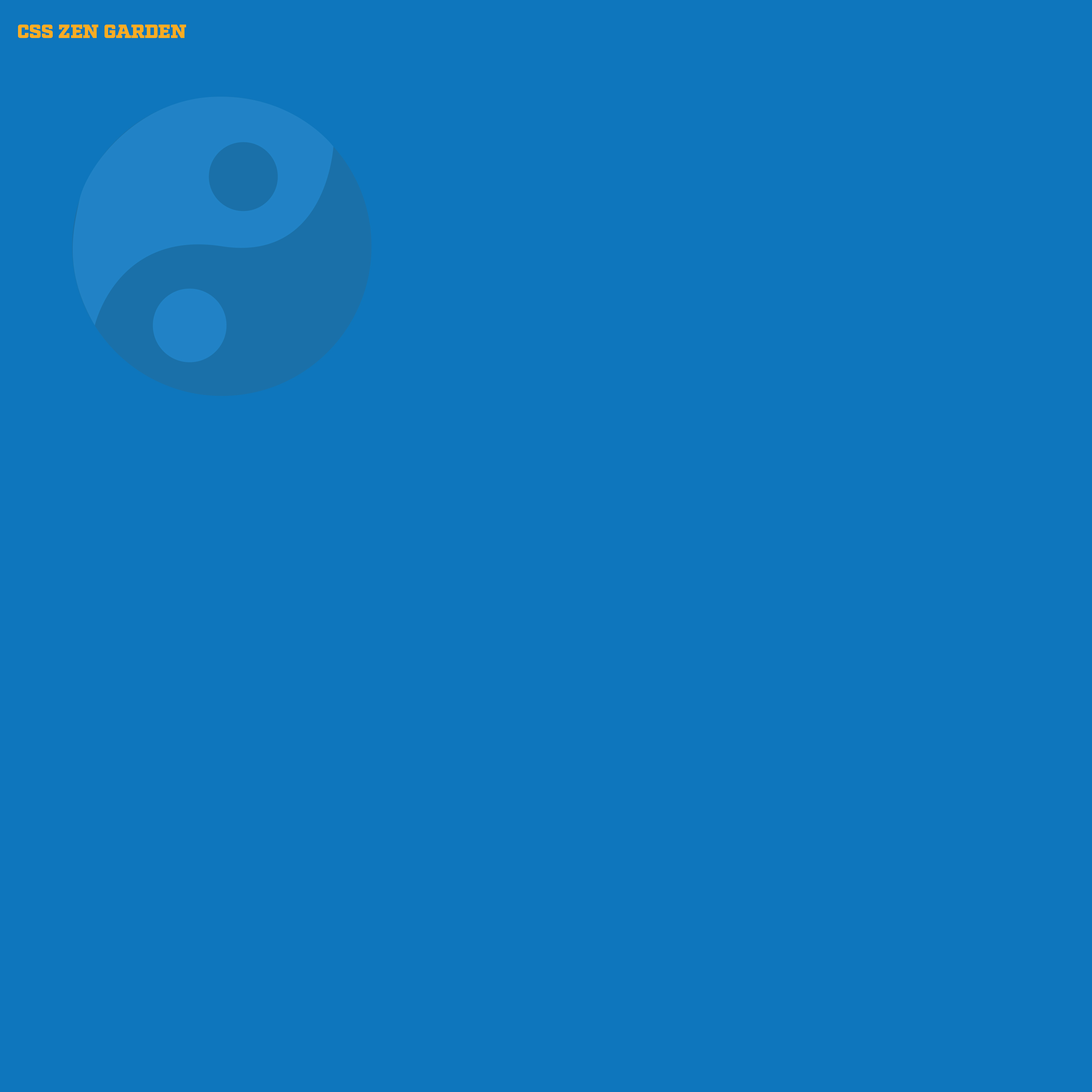
<style>
.page{position:relative;width:1092px;height:1092px;background:#0e76bd}
.page>*{position:absolute;margin:0}
.t1{font:19.1px "Factoria-Ultra";color:#fbac22}
</style>
<div class="page">
<p class="t1" style="left:18px;top:25px;width:168px;height:13px">CSS ZEN GARDEN</p>
</div>
